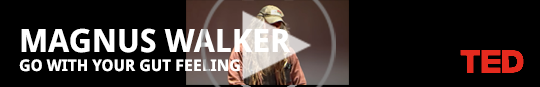
<style>
.page{position:relative;width:540px;height:87px;background:#000000}
.page>*{position:absolute;margin:0}
.t1{font:32px "DroidSans-Bold";color:#ffffff;text-transform:uppercase}
.t2{font:16px "DroidSans-Bold";color:#ffffff;text-transform:uppercase}
</style>
<div class="page">
<p class="t1" style="left:21px;top:28px;width:270px;height:25px">Magnus Walker</p>
<p class="t2" style="left:19px;top:59px;width:221px;height:13px">go with your gut feeling</p>
</div>
